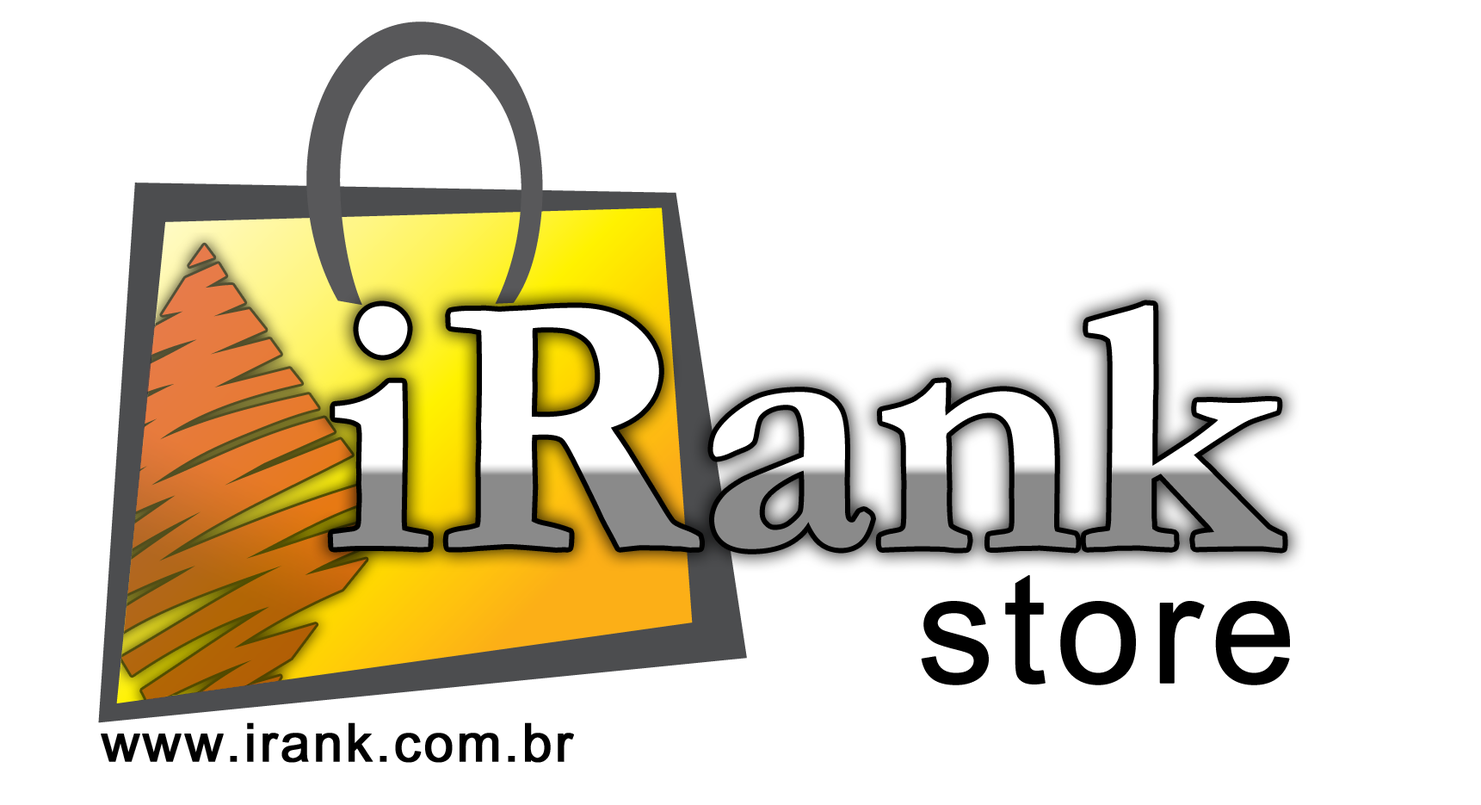
<style>
.page{position:relative;width:1481px;height:805px;background:#ffffff}
.page>*{position:absolute;margin:0}
.t1{font:153.1px "ArialMT";letter-spacing:0.035em;color:#000000;font-weight:bold}
.t2{font:53.1px "ArialMT";letter-spacing:0.035em;color:#000000;font-weight:bold}
</style>
<div class="page">
<p class="t1" style="left:921px;top:575px;width:369px;height:110px">store</p>
<p class="t2" style="left:101px;top:722px;width:473px;height:41px">www.irank.com.br</p>
</div>
